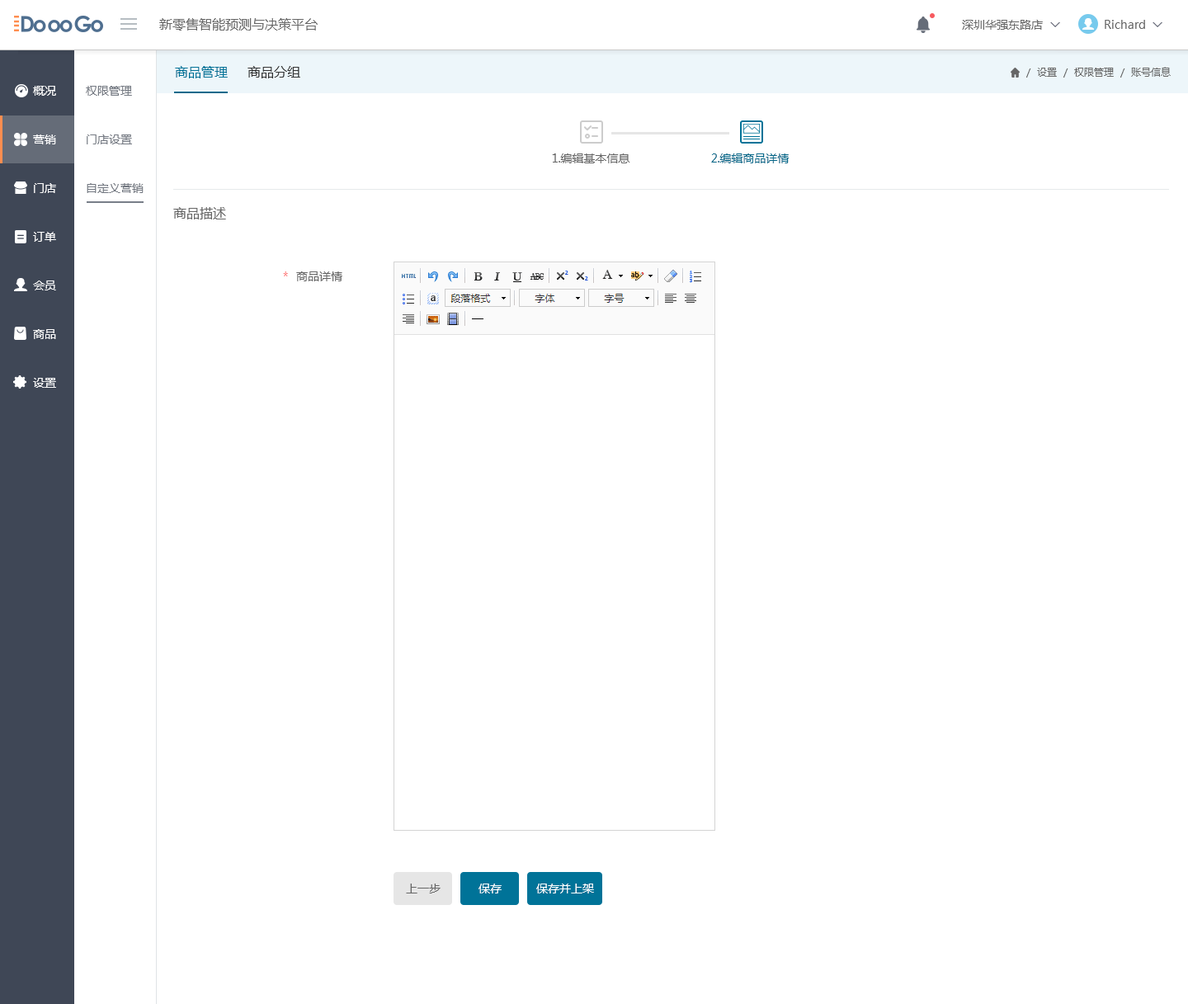
<style>
.page{position:relative;width:1188px;height:1004px;background:#ffffff}
.page>*{position:absolute;margin:0}
.t1{font:13.2px "MicrosoftYaHeiUI";color:#666666}
.t2{font:11.5px "MicrosoftYaHeiUI";color:#666666}
.t3{font:11.5px "Marlett";color:#666666}
.t4{font:13.2px "MicrosoftYaHeiUI";color:#007398}
.t5{font:13.2px "MicrosoftYaHeiUI";color:#333333}
.t6{font:9.9px "MicrosoftYaHeiUI";color:#666666}
.t7{font:11.5px/48.7px "MicrosoftYaHeiUI";color:#ffffff}
.t8{font:11.5px/48.7px "MicrosoftYaHeiUI";color:#747982}
.t9{font:11.5px "MicrosoftYaHeiUI";color:#086a8b}
.t10{font:11.5px "MicrosoftYaHeiUI";color:#ff7474}
.t11{font:11.5px "MicrosoftYaHeiUI";color:#ffffff}
</style>
<div class="page">
<p class="t1" style="left:159px;top:18px;width:159px;height:13px">新零售智能预测与决策平台</p>
<p class="t2" style="left:962px;top:20px;width:81px;height:10px">深圳华强东路店</p>
<p class="t2" style="left:1105px;top:20px;width:53px;height:9px">Richard <span class="t3">6</span></p>
<p class="t4" style="left:175px;top:66px;width:53px;height:12px">商品管理</p>
<p class="t5" style="left:247px;top:66px;width:53px;height:12px">商品分组</p>
<p class="t6" style="left:1026px;top:67px;width:145px;height:11px">/  设置  /  权限管理  /  账号信息</p>
<p class="t7" style="left:33px;top:86px;width:23px;height:302px">概况<br>营销<br>门店<br>订单<br>会员<br>商品<br>设置</p>
<p class="t8" style="left:86px;top:86px;width:58px;height:107px">权限管理<br>门店设置<br>自定义营销</p>
<p class="t2" style="left:552px;top:153px;width:78px;height:10px">1.编辑基本信息</p>
<p class="t9" style="left:711px;top:153px;width:78px;height:10px">2.编辑商品详情</p>
<p class="t1" style="left:173px;top:207px;width:53px;height:12px">商品描述</p>
<p class="t10" style="left:283px;top:271px;width:5px;height:5px">*</p>
<p class="t2" style="left:296px;top:271px;width:46px;height:10px">商品详情</p>
<p class="t2" style="left:406px;top:883px;width:34px;height:10px">上一步</p>
<p class="t11" style="left:478px;top:883px;width:24px;height:10px">保存</p>
<p class="t11" style="left:536px;top:883px;width:58px;height:10px">保存并上架</p>
</div>
